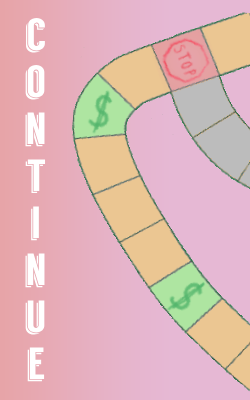
<style>
.page{position:relative;width:250px;height:400px}
.page>*{position:absolute;margin:0}
.t1{font:45px/47px "Langdon";color:#ffffff}
</style>
<div class="page">
<p class="t1" style="left:25px;top:18px;width:21px;height:364px;text-align:center">c<br>o<br>n<br>t<br>i<br>n<br>u<br>e</p>
</div>
